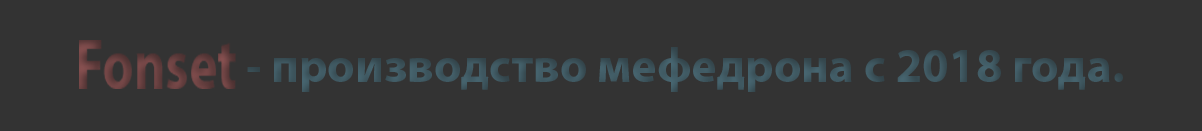
<style>
.page{position:relative;width:1202px;height:131px;background:#333333}
.page>*{position:absolute;margin:0}
.t1{font:48.2px "MyriadPro-Bold";color:#3e575f}
</style>
<div class="page">
<p class="t1" style="left:247px;top:47px;width:876px;height:45px">- производство мефедрона с 2018 года.</p>
</div>
